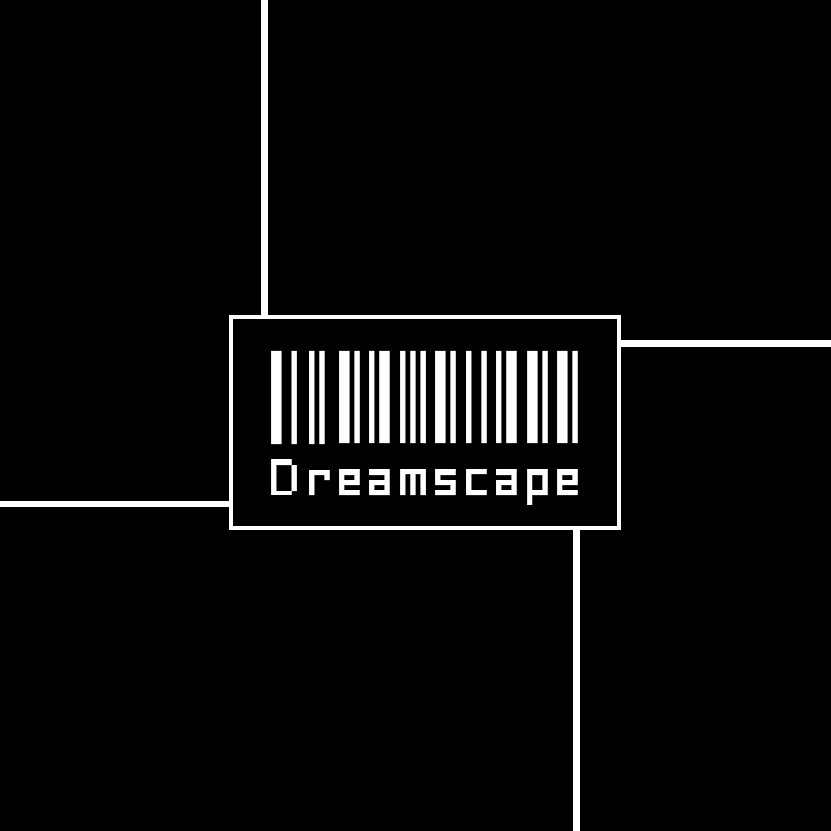
<style>
.page{position:relative;width:831px;height:831px;background:#000000}
.page>*{position:absolute;margin:0}
.t1{font:133.3px "Paskowy";color:#ffffff}
</style>
<div class="page">
<p class="t1" style="left:271px;top:350px;width:307px;height:155px">Dreamscape</p>
</div>
